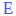
<style>
.page{position:relative;width:16px;height:16px;background:#ffffff}
.page>*{position:absolute;margin:0}
.t1{font:18px "Athelas-Regular";color:#495aff}
</style>
<div class="page">
<p class="t1" style="left:3px;top:2px;width:10px;height:12px">E</p>
</div>
